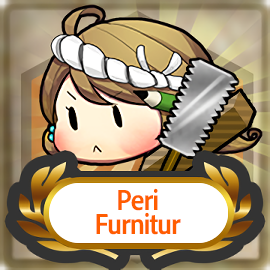
<style>
.page{position:relative;width:270px;height:270px}
.page>*{position:absolute;margin:0}
.t1{font:30px/24px "AdobeClean-Bold";letter-spacing:-0.04em;color:#ff5d00;scale:0.9 1}
</style>
<div class="page">
<p class="t1" style="left:96px;top:188px;width:85px;height:47px;text-align:center">Peri<br>Furnitur</p>
</div>
